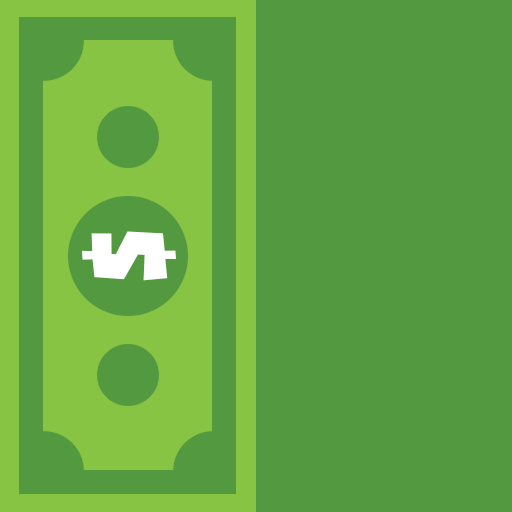
<style>
.page{position:relative;width:512px;height:512px;background:#539940}
.page>*{position:absolute;margin:0}
.t1{font:118.1px "Troika";color:#ffffff}
</style>
<div class="page">
<p class="t1" style="left:82px;top:231px;width:94px;height:50px;rotate:-90deg">$</p>
</div>
